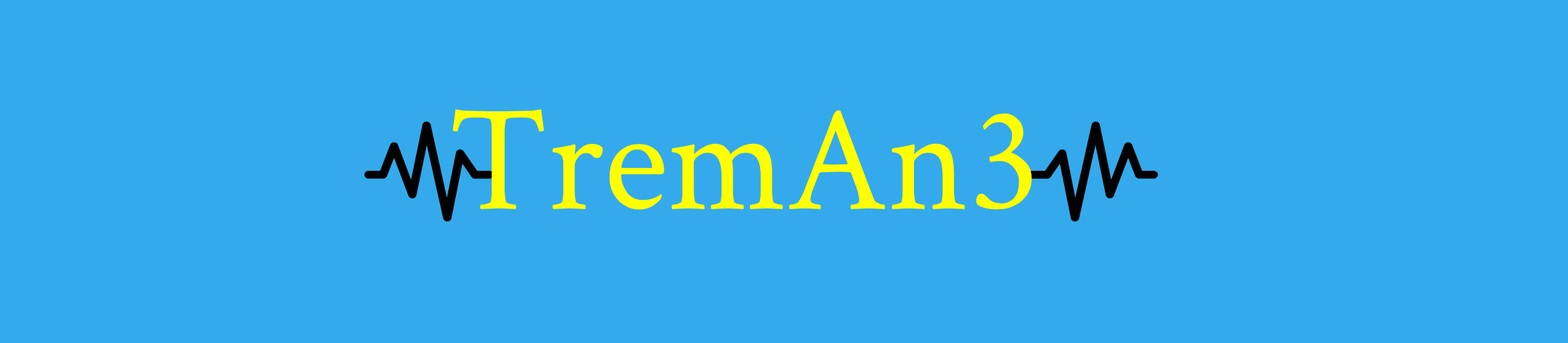
<style>
.page{position:relative;width:1568px;height:343px;background:#34aaec}
.page>*{position:absolute;margin:0}
.t1{font:151.7px "CrimsonText-Regular";color:#ffff00}
</style>
<div class="page">
<p class="t1" style="left:452px;top:109px;width:580px;height:101px">TremAn3</p>
</div>
